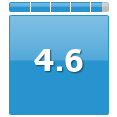
<style>
.page{position:relative;width:117px;height:117px;background:#2793cf}
.page>*{position:absolute;margin:0}
.t1{font:36px "Colaborate-Bold";color:#ffffff;text-transform:uppercase}
</style>
<div class="page">
<p class="t1" style="left:34px;top:49px;width:49px;height:23px">4.6</p>
</div>
